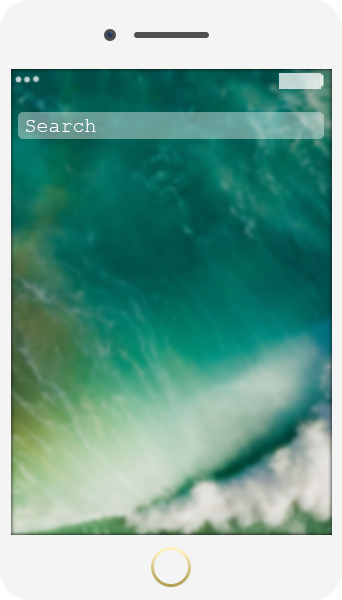
<style>
.page{position:relative;width:342px;height:600px;background:#f4f4f4}
.page>*{position:absolute;margin:0}
.t1{font:20px "CourierNewPSMT";color:#ffffff}
</style>
<div class="page">
<p class="t1" style="left:26px;top:119px;width:70px;height:13px">Search</p>
</div>
